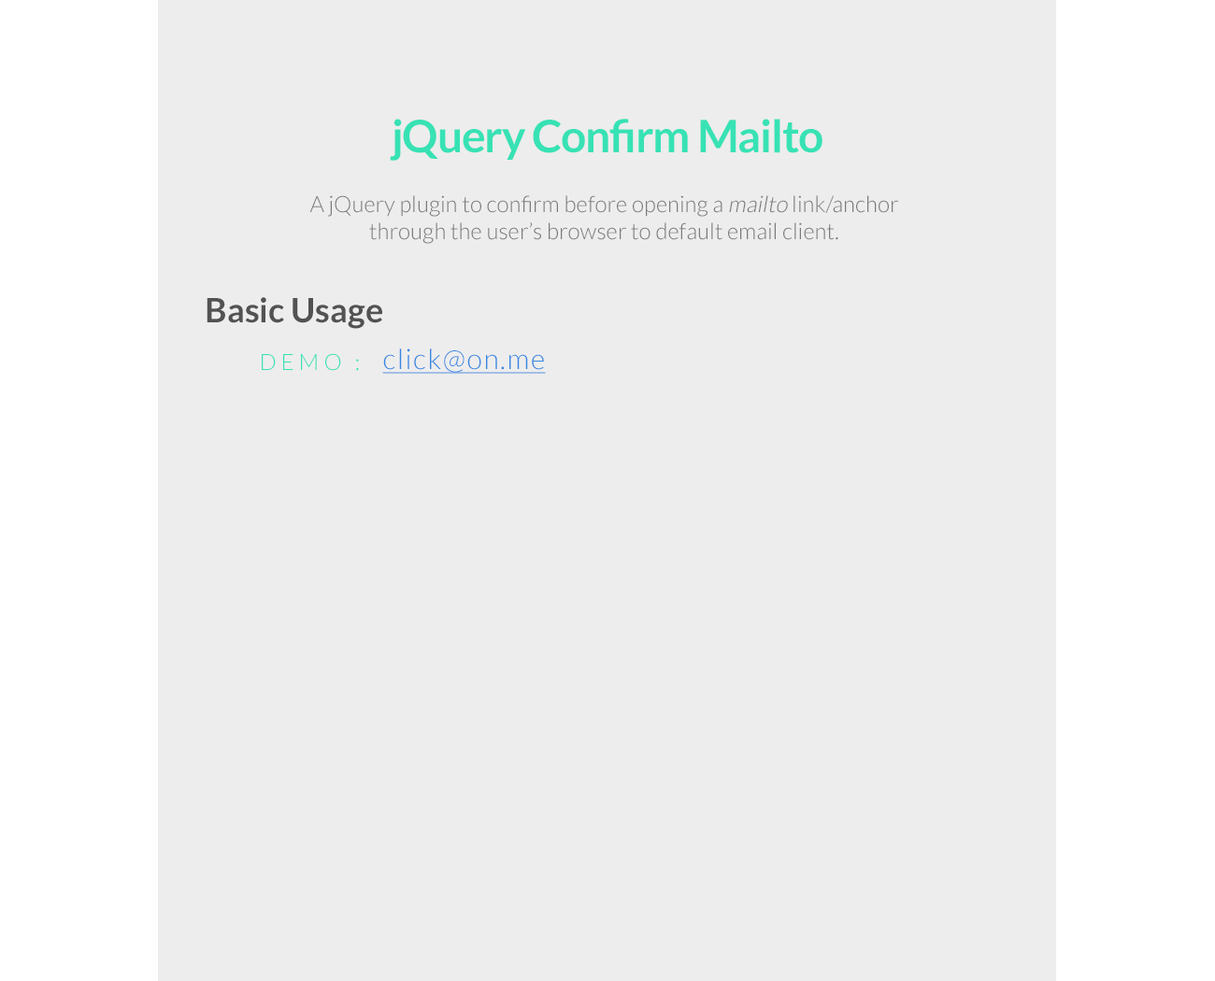
<style>
.page{position:relative;width:1215px;height:981px;background:#ededed}
.page>*{position:absolute;margin:0}
.t1{font:44.9px "Lato-Bold";letter-spacing:-0.025em;color:#37e2b4}
.t2{font:22.4px "Lato-Light";color:#7b7b7b}
.t3{font:22.4px "Lato-Light";color:#7b7b7b;font-style:italic}
.t4{font:33.6px "Lato-Bold";color:#525252}
.t5{font:22.4px "Lato-Light";letter-spacing:0.2em;color:#37e2b4}
.t6{font:28px "Lato-Light";letter-spacing:0.05em;color:#3587e2;text-decoration:underline}
</style>
<div class="page">
<p class="t1" style="left:390px;top:119px;width:432px;height:42px">jQuery Confirm Mailto</p>
<p class="t2" style="left:309px;top:195px;width:589px;height:49px;text-align:center">A jQuery plugin to confirm before opening a <span class="t3">mailto</span> link/anchor through the user’s browser to default email client.</p>
<p class="t4" style="left:207px;top:297px;width:175px;height:32px">Basic Usage</p>
<p class="t5" style="left:262px;top:353px;width:97px;height:18px">DEMO :</p>
<p class="t6" style="left:382px;top:349px;width:164px;height:25px">click@on.me</p>
</div>
